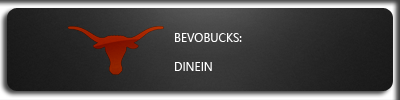
<style>
.page{position:relative;width:400px;height:100px}
.page>*{position:absolute;margin:0}
.t1{font:12px "SegoeUI";color:#ffffff}
</style>
<div class="page">
<p class="t1" style="left:175px;top:33px;width:67px;height:38px">BEVOBUCKS:<br><br>DINEIN</p>
</div>
